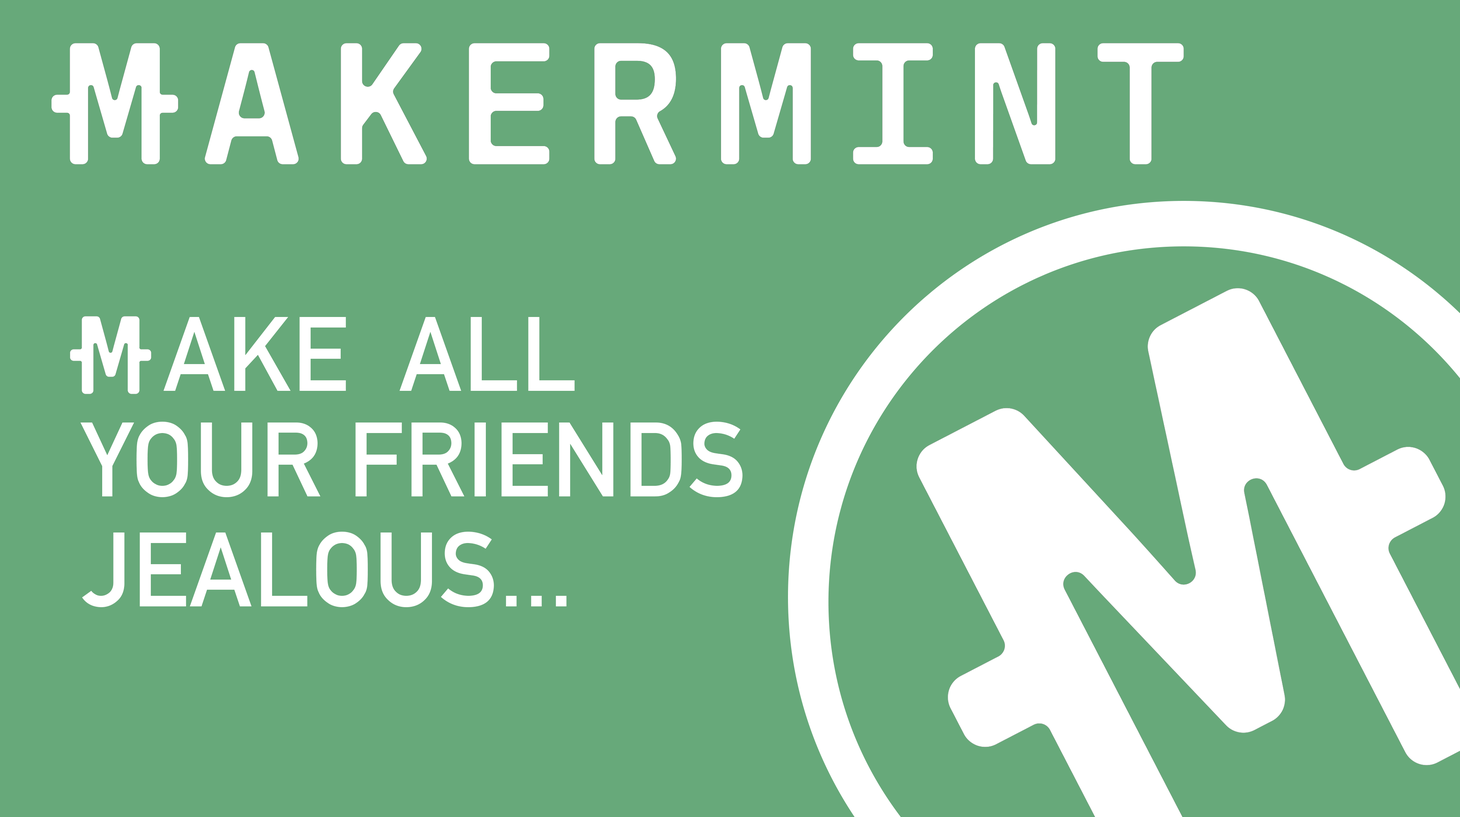
<style>
.page{position:relative;width:1460px;height:817px;background:#67a97a}
.page>*{position:absolute;margin:0}
.t1{font:103.8px "DINAlternate-Bold";color:#ffffff}
</style>
<div class="page">
<p class="t1" style="left:163px;top:317px;width:412px;height:74px">AKE  ALL</p>
<p class="t1" style="left:80px;top:421px;width:663px;height:76px">YOUR FRIENDS</p>
<p class="t1" style="left:82px;top:531px;width:485px;height:76px">JEALOUS...</p>
</div>
